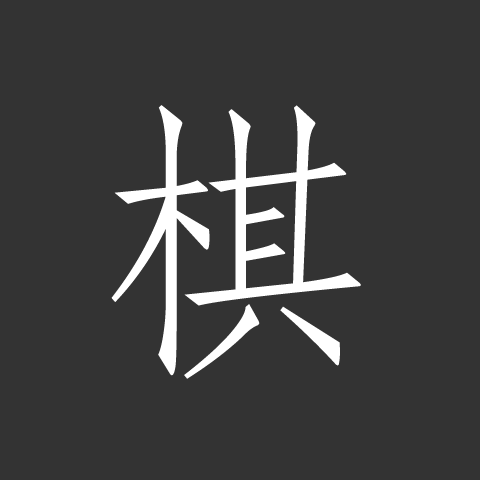
<style>
.page{position:relative;width:480px;height:480px;background:#333333}
.page>*{position:absolute;margin:0}
.t1{font:288px "STFangsong";color:#ffffff}
</style>
<div class="page">
<p class="t1" style="left:111px;top:105px;width:250px;height:274px">棋</p>
</div>
